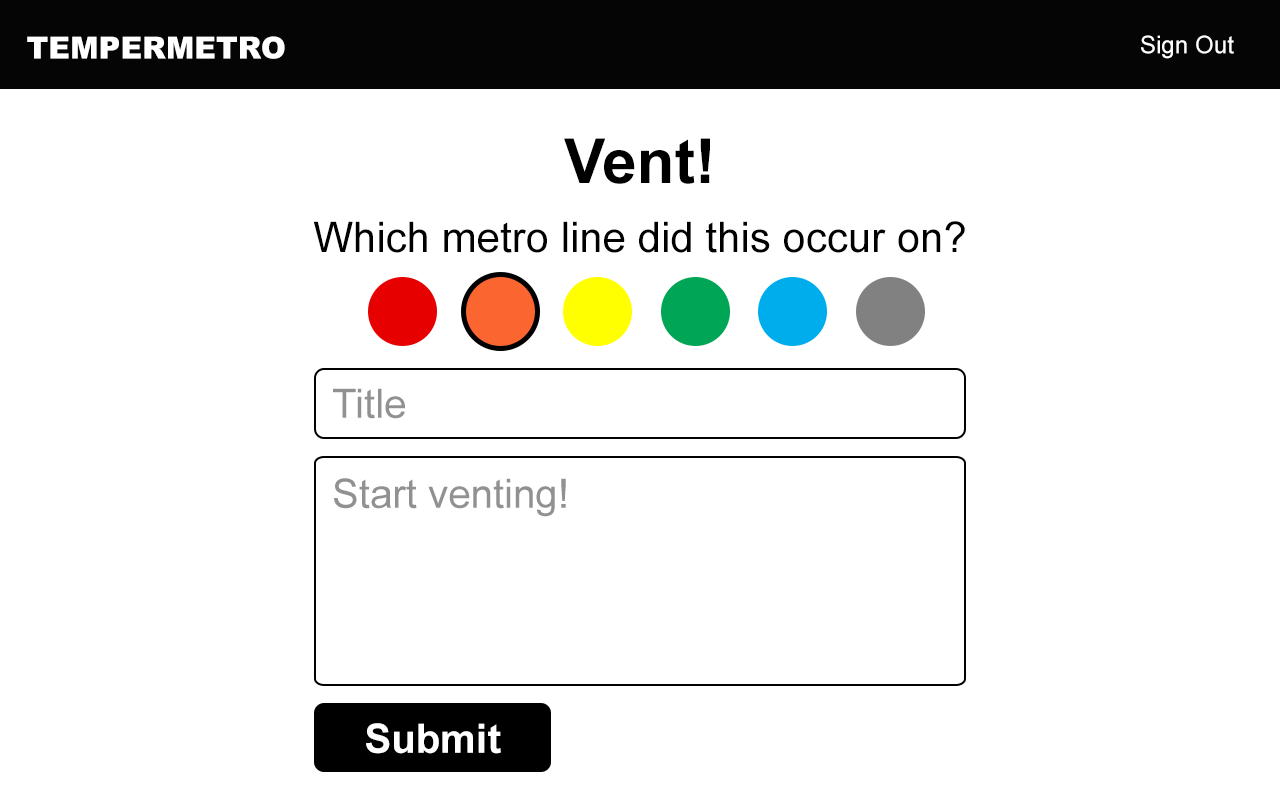
<style>
.page{position:relative;width:1280px;height:800px;background:#ffffff}
.page>*{position:absolute;margin:0}
.t1{font:30.2px "Arial-Black";color:#ffffff}
.t2{font:24.2px "ArialMT";color:#ffffff}
.t3{font:62.2px "Arial-BoldMT";color:#000000}
.t4{font:42px "ArialMT";color:#000000}
.t5{font:40.2px "ArialMT";color:#919191}
.t6{font:40.4px "Arial-BoldMT";color:#ffffff}
</style>
<div class="page">
<p class="t1" style="left:27px;top:36px;width:258px;height:23px">TEMPERMETRO</p>
<p class="t2" style="left:1141px;top:35px;width:93px;height:24px">Sign Out</p>
<p class="t3" style="left:564px;top:138px;width:146px;height:46px">Vent!</p>
<p class="t4" style="left:313px;top:221px;width:652px;height:32px">Which metro line did this occur on?</p>
<p class="t5" style="left:333px;top:388px;width:72px;height:31px">Title</p>
<p class="t5" style="left:334px;top:478px;width:232px;height:39px">Start venting!</p>
<p class="t6" style="left:366px;top:723px;width:135px;height:31px">Submit</p>
</div>
